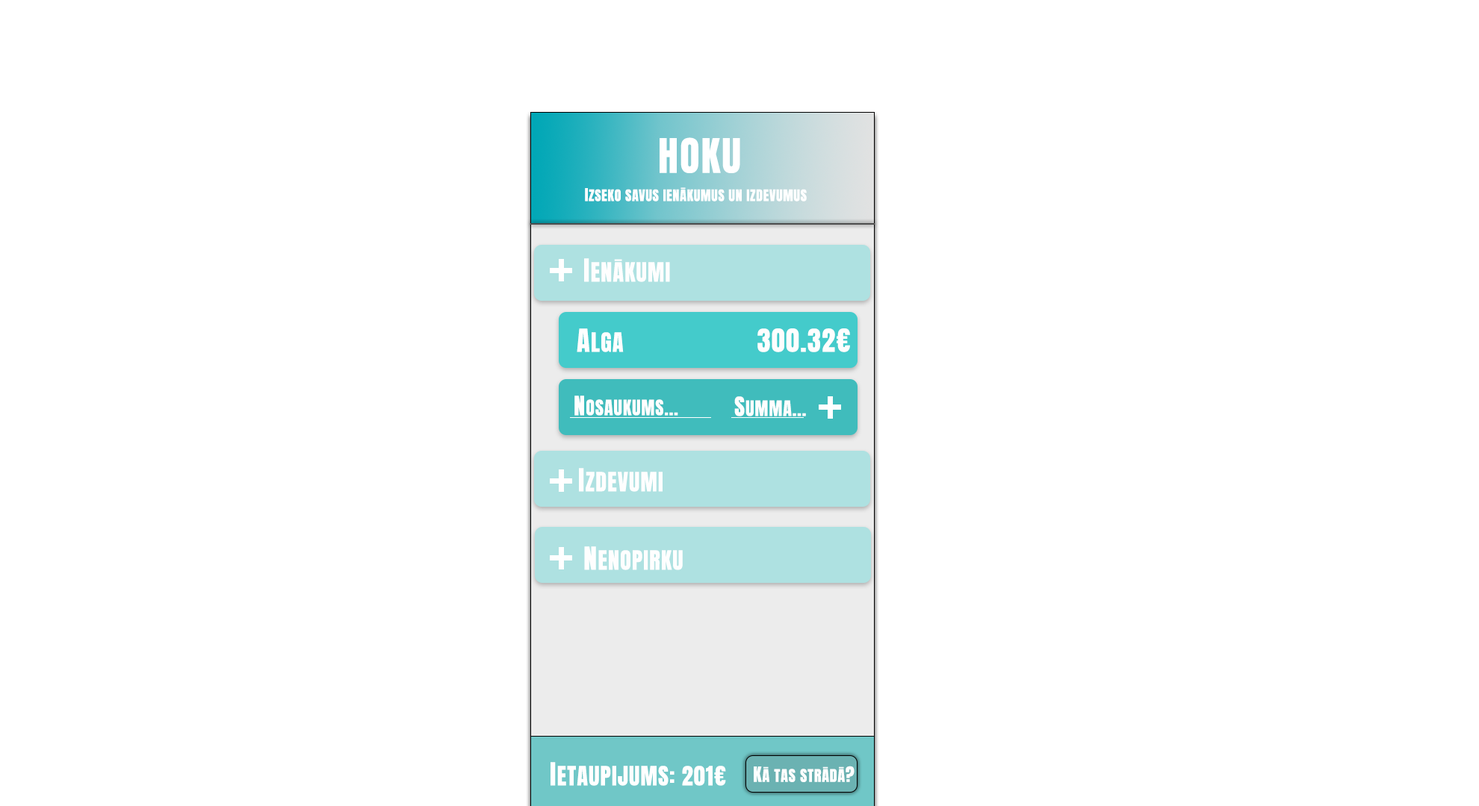
<style>
.page{position:relative;width:1479px;height:806px;background:#ffffff}
.page>*{position:absolute;margin:0}
.t1{font:40.3px "Anton-Regular";letter-spacing:0.04em;color:#ffffff;text-transform:uppercase}
.t2{font:13.4px "Anton-Regular";letter-spacing:0.04em;color:#ffffff;text-transform:uppercase}
.t3{font:14.9px "Anton-Regular";letter-spacing:0.04em;color:#ffffff;text-transform:uppercase}
.t4{font:22.4px "Anton-Regular";letter-spacing:0.04em;color:#fefefe;text-transform:uppercase}
.t5{font:26.9px "Anton-Regular";letter-spacing:0.04em;color:#fefefe;text-transform:uppercase}
.t6{font:17.9px "Anton-Regular";letter-spacing:0.04em;color:#fefefe;text-transform:uppercase}
.t7{font:22.4px "Anton-Regular";letter-spacing:0.04em;color:#ffffff;text-transform:uppercase}
.t8{font:26.9px "Anton-Regular";letter-spacing:0.04em;color:#ffffff;text-transform:uppercase}
.t9{font:17.9px "Anton-Regular";letter-spacing:0.04em;color:#ffffff;text-transform:uppercase}
</style>
<div class="page">
<p class="t1" style="left:659px;top:137px;width:81px;height:36px">HOKU</p>
<p class="t2" style="left:585px;top:187px;width:221px;height:15px"><span class="t3">i</span>ZSEKO SAVUS IENĀKUMUS un Izdevumus</p>
<p class="t4" style="left:584px;top:258px;width:86px;height:24px"><span class="t5">I</span>enākumi</p>
<p class="t4" style="left:576px;top:329px;width:48px;height:23px"><span class="t5">A</span>LGA</p>
<p class="t5" style="left:757px;top:329px;width:93px;height:23px">300.32€</p>
<p class="t6" style="left:574px;top:396px;width:104px;height:20px"><span class="t4">N</span>osaukums...</p>
<p class="t6" style="left:734px;top:397px;width:72px;height:20px"><span class="t4">S</span>umma...</p>
<p class="t4" style="left:579px;top:468px;width:83px;height:24px"><span class="t5">I</span>Zdevumi</p>
<p class="t4" style="left:584px;top:547px;width:99px;height:24px"><span class="t5">N</span>eNOPIRKU</p>
<p class="t7" style="left:550px;top:762px;width:176px;height:24px"><span class="t8">I</span>etaupijums: 201€</p>
<p class="t3" style="left:753px;top:766px;width:101px;height:17px"><span class="t9">k</span>ā tas strādā<span class="t9">?</span></p>
</div>
